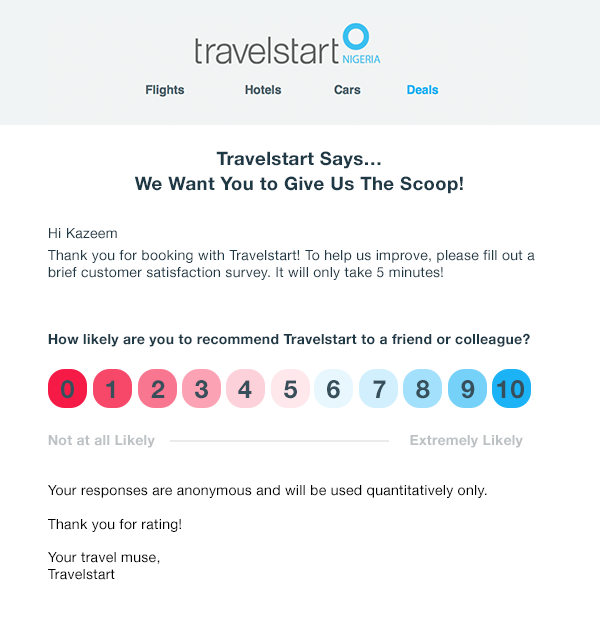
<style>
.page{position:relative;width:600px;height:633px;background:#ffffff}
.page>*{position:absolute;margin:0}
.t1{font:18.6px/24.2px "HelveticaNeue-Bold";letter-spacing:0.02em;color:#1e3945}
.t2{font:18.6px/18px "HelveticaNeue-Bold";letter-spacing:0.02em;color:#1e3945}
.t3{font:14px "HelveticaNeue";letter-spacing:0.02em;color:#1e3945}
.t4{font:14px "HelveticaNeue-Bold";letter-spacing:0.02em;color:#1e3945}
.t5{font:14px "HelveticaNeue-Bold";letter-spacing:0.02em;color:#bcc1c3}
.t6{font:14px "HelveticaNeue";letter-spacing:0.02em;color:#010101}
.t7{font:25px "HelveticaNeue-Bold";letter-spacing:0.04em;color:#374f5a}
</style>
<div class="page">
<p class="t1" style="left:134px;top:151px;width:329px;height:43px;text-align:center"><span class="t2">Travelstart Says…<br></span>We Want You to Give Us The Scoop!</p>
<p class="t3" style="left:48px;top:228px;width:487px;height:352px">Hi Kazeem<br><br>Thank you for booking with Travelstart! To help us improve, please fill out a brief customer satisfaction survey. It will only take 5 minutes!<br><br><span class="t4"><br><br>How likely are you to recommend Travelstart to a friend or colleague?<br><br><br><br><br><br></span><span class="t5">Not at all Likely                                                             Extremely Likely<br><br><br></span><span class="t6">Your responses are anonymous and will be used quantitatively only.<br><br>Thank you for rating!<br><br>Your travel muse,<br>Travelstart</span></p>
<p class="t7" style="left:61px;top:380px;width:463px;height:19px">0    1    2   3   4   5   6   7   8   9   10</p>
</div>
